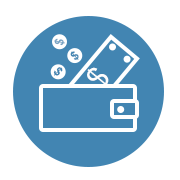
<style>
.page{position:relative;width:180px;height:180px;background:#ffffff}
.page>*{position:absolute;margin:0}
.t1{font:12px "Arial-BoldMT";color:#76a2c3}
.t2{font:12px "Arial-BoldMT";color:#4285b2}
.t3{font:30px "ArialMT";color:#fefdfd}
</style>
<div class="page">
<p class="t1" style="left:54px;top:38px;width:11px;height:8px;rotate:-78deg">$</p>
<p class="t2" style="left:70px;top:51px;width:9px;height:9px;rotate:-42deg">$</p>
<p class="t2" style="left:53px;top:67px;width:10px;height:9px;rotate:46deg">$</p>
<p class="t3" style="left:87px;top:67px;width:22px;height:21px;rotate:-50deg">$</p>
</div>
